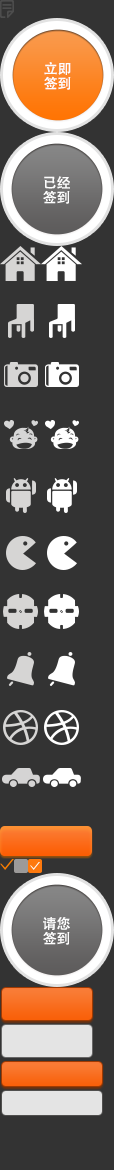
<style>
.page{position:relative;width:114px;height:1170px;background:#333333}
.page>*{position:absolute;margin:0}
.t1{font:14px/14.7px "STHeiti";color:#fdfdfd}
</style>
<div class="page">
<p class="t1" style="left:44px;top:62px;width:27px;height:28px">立即<br>签到</p>
<p class="t1" style="left:43px;top:176px;width:27px;height:28px">已经<br>签到</p>
<p class="t1" style="left:43px;top:917px;width:27px;height:28px">请您<br>签到</p>
</div>
